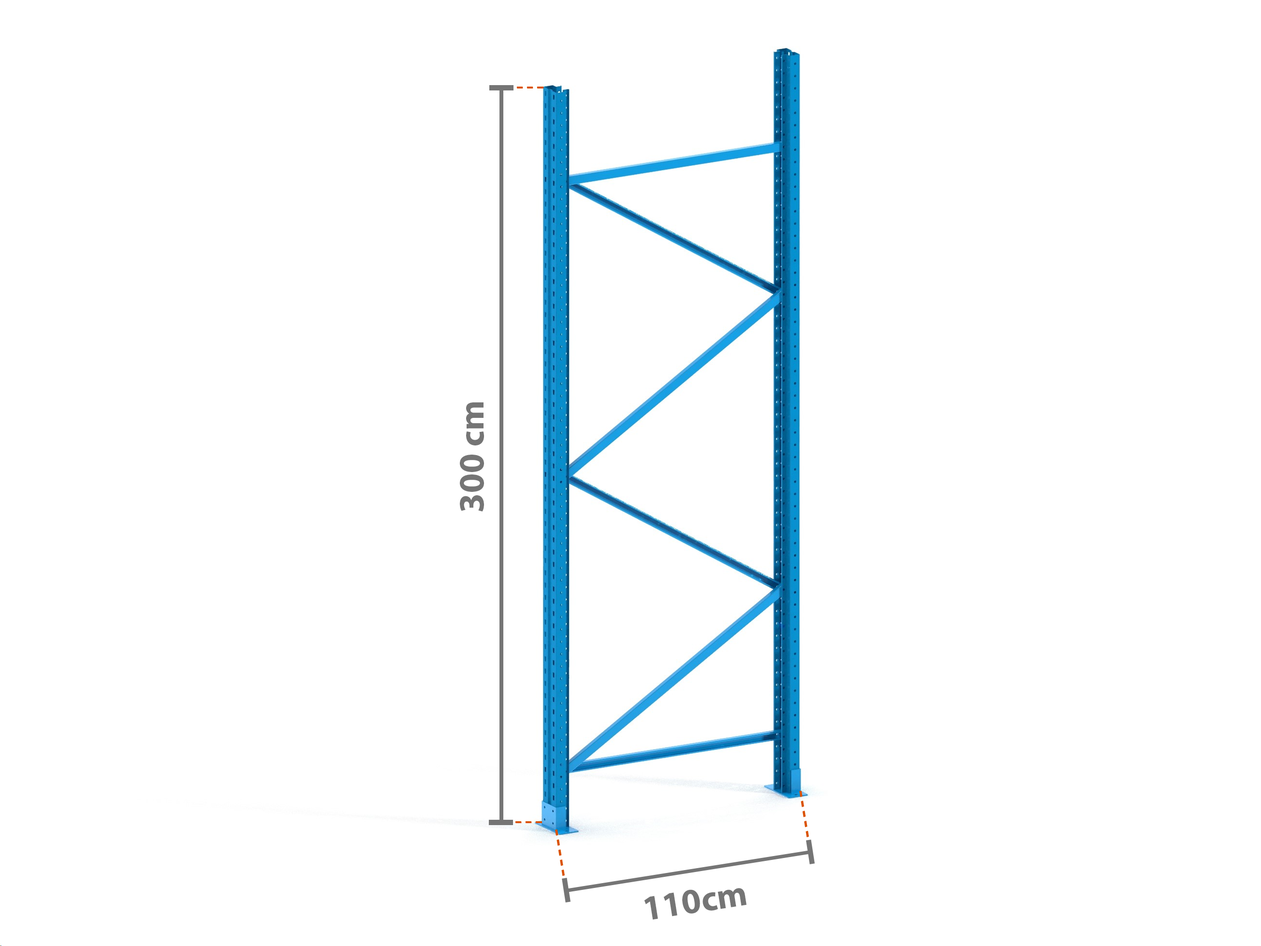
<style>
.page{position:relative;width:1261px;height:946px;background:#ffffff}
.page>*{position:absolute;margin:0}
.t1{font:35.5px "MyriadPro-Bold";color:#757575}
</style>
<div class="page">
<p class="t1" style="left:460px;top:402px;width:24px;height:110px;rotate:-90deg">300 cm</p>
<p class="t1" style="left:644px;top:888px;width:102px;height:32px;rotate:-9deg">110cm</p>
</div>
